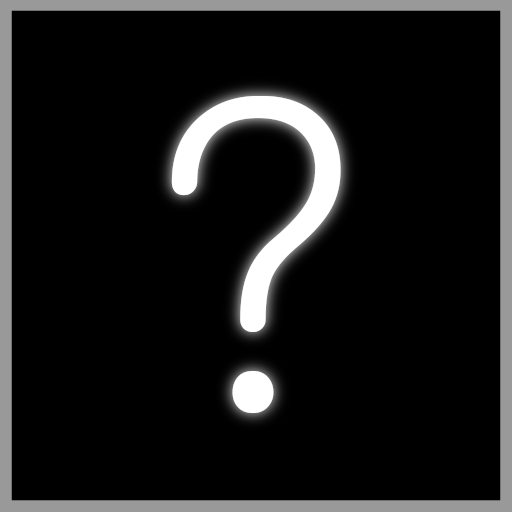
<style>
.page{position:relative;width:512px;height:512px;background:#000000}
.page>*{position:absolute;margin:0}
.t1{font:417px "Gulim";color:#ffffff}
</style>
<div class="page">
<p class="t1" style="left:171px;top:96px;width:170px;height:317px">?</p>
</div>
